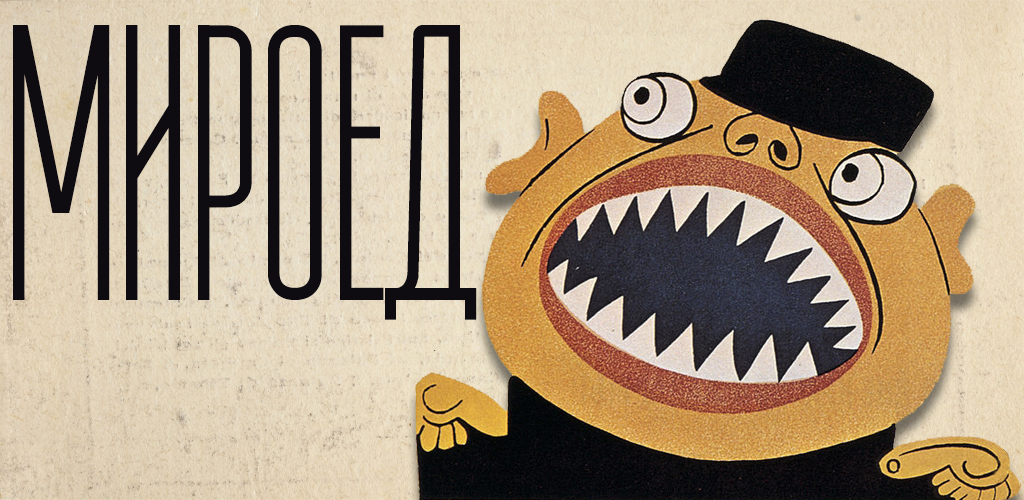
<style>
.page{position:relative;width:1024px;height:500px}
.page>*{position:absolute;margin:0}
.t1{font:550px "Highliner-Light";letter-spacing:-0.006em;color:#0e0c11;scale:0.95 1}
</style>
<div class="page">
<p class="t1" style="left:13px;top:25px;width:464px;height:295px">МИРОЕД</p>
</div>
